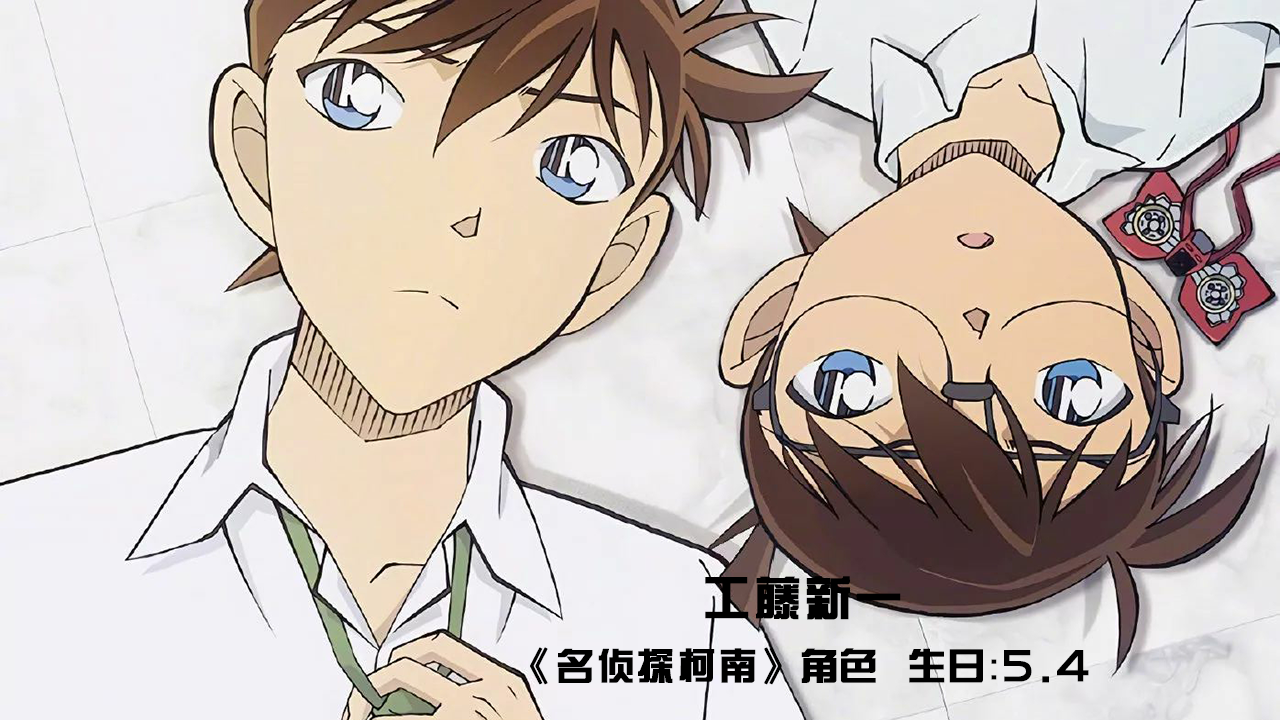
<style>
.page{position:relative;width:1280px;height:720px}
.page>*{position:absolute;margin:0}
.t1{font:37.7px/47.1px "BDZYJT--GB1-0";letter-spacing:0.05em;color:#000000;font-weight:bold}
.t2{font:47.1px/47.1px "BDZYJT--GB1-0";letter-spacing:0.05em;color:#000000;font-weight:bold}
</style>
<div class="page">
<p class="t1" style="left:530px;top:576px;width:559px;height:109px;text-align:center"><span class="t2">工藤新一<br></span>《名侦探柯南》角色  生日：<span class="t2">5.4</span></p>
</div>
